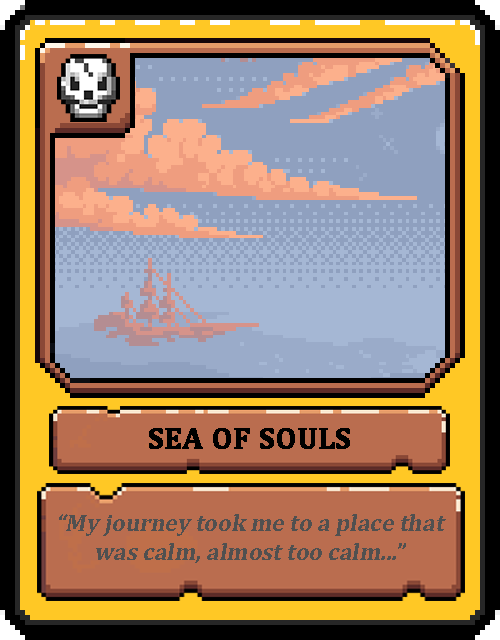
<style>
.page{position:relative;width:500px;height:640px}
.page>*{position:absolute;margin:0}
.t1{font:30px "Cambria-Bold";color:#000000;text-transform:uppercase;font-weight:bold}
.t2{font:24px "Cambria-Bold";color:#505050;font-style:italic}
</style>
<div class="page">
<p class="t1" style="left:149px;top:428px;width:201px;height:21px">Sea of souls</p>
<p class="t2" style="left:59px;top:514px;width:387px;height:49px;text-align:center">“My journey took me to a place that was calm, almost too calm...”</p>
</div>
